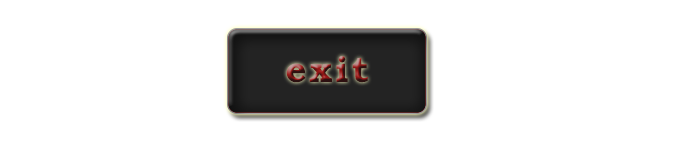
<style>
.page{position:relative;width:683px;height:153px;background:#ffffff}
.page>*{position:absolute;margin:0}
.t1{font:36px "BookmanOldStyle-Bold";letter-spacing:0.1em}
</style>
<div class="page">
<p class="t1" style="left:286px;top:56px;width:82px;height:27px">exit</p>
</div>
